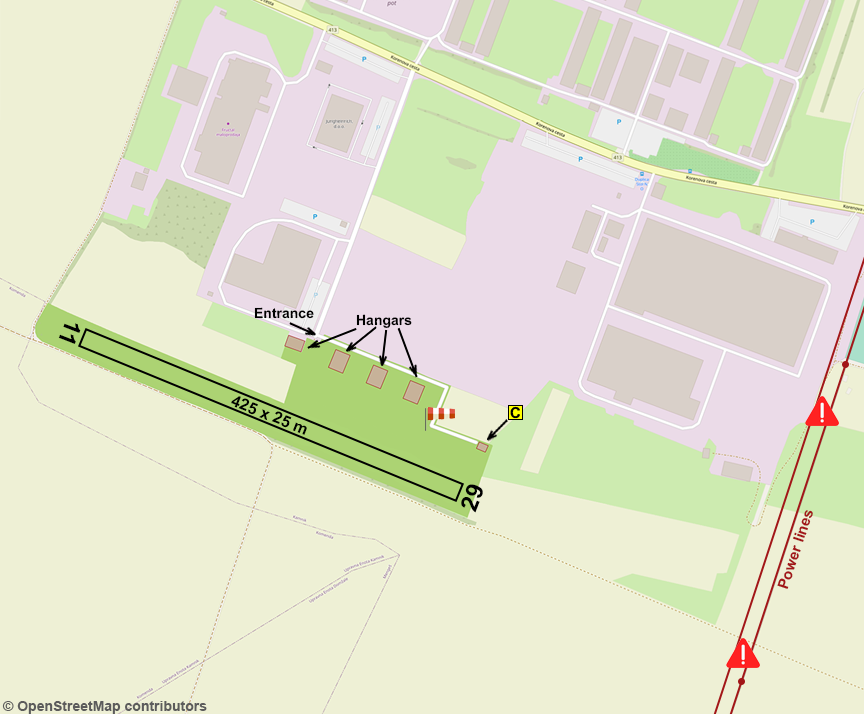
<style>
.page{position:relative;width:864px;height:714px;background:#eef0d5}
.page>*{position:absolute;margin:0}
.t1{font:14px "Arial-BoldMT";color:#000000}
.t2{font:24px "Arial-BoldMT";color:#000000}
.t3{font:16px "Arial-BoldMT";color:#000000}
.t4{font:15px "Arial-BoldMT";color:#a21618}
.t5{font:14px "Arial-BoldMT";color:#5c5c5c}
</style>
<div class="page">
<p class="t1" style="left:254px;top:307px;width:60px;height:12px;rotate:-1deg">Entrance</p>
<p class="t1" style="left:356px;top:314px;width:56px;height:14px;rotate:-1deg">Hangars</p>
<p class="t2" style="left:58px;top:323px;width:23px;height:21px;rotate:111deg">11</p>
<p class="t3" style="left:231px;top:396px;width:76px;height:39px;rotate:21deg">425 x 25 m</p>
<p class="t2" style="left:461px;top:484px;width:22px;height:29px;rotate:-69deg">29</p>
<p class="t4" style="left:777px;top:510px;width:36px;height:79px;rotate:-72deg">Power lines</p>
<p class="t5" style="left:2px;top:701px;width:205px;height:13px">© OpenStreetMap contributors</p>
</div>
